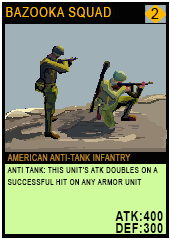
<style>
.page{position:relative;width:170px;height:241px;background:#a0b2b8}
.page>*{position:absolute;margin:0}
.t1{font:12.8px "ArialMT";letter-spacing:0.08em;color:#ffb800;text-transform:uppercase;scale:0.86 1}
.t2{font:12.8px "ArialMT";letter-spacing:0.08em;color:#050606;text-transform:uppercase;scale:0.86 1}
.t3{font:15.1px "ArialMT";letter-spacing:0.08em;color:#010100;text-transform:uppercase;scale:0.93 1}
.t4{font:8.1px/12px "ArialMT";letter-spacing:0.08em;color:#040301;text-transform:uppercase;scale:0.76 1}
.t5{font:8.9px/20.2px "ArialMT";letter-spacing:0.08em;color:#b4832c;text-transform:uppercase;scale:0.76 1}
.t6{font:13.9px/12px "Arial-BoldMT";letter-spacing:0.08em;color:#040301;text-transform:uppercase;scale:0.76 1}
</style>
<div class="page">
<p class="t1" style="left:6px;top:7px;width:113px;height:11px">bazooka squad<span class="t2">B</span></p>
<p class="t3" style="left:151px;top:8px;width:8px;height:11px">2</p>
<p class="t4" style="left:7px;top:154px;width:156px;height:79px"><span class="t5">American anti-tank infantry<br></span>anti tank: this unit’s atk doubles on a successful hit on any armor unit<br><br><br><span class="t6">ATK:400<br>DEF:300</span></p>
</div>
